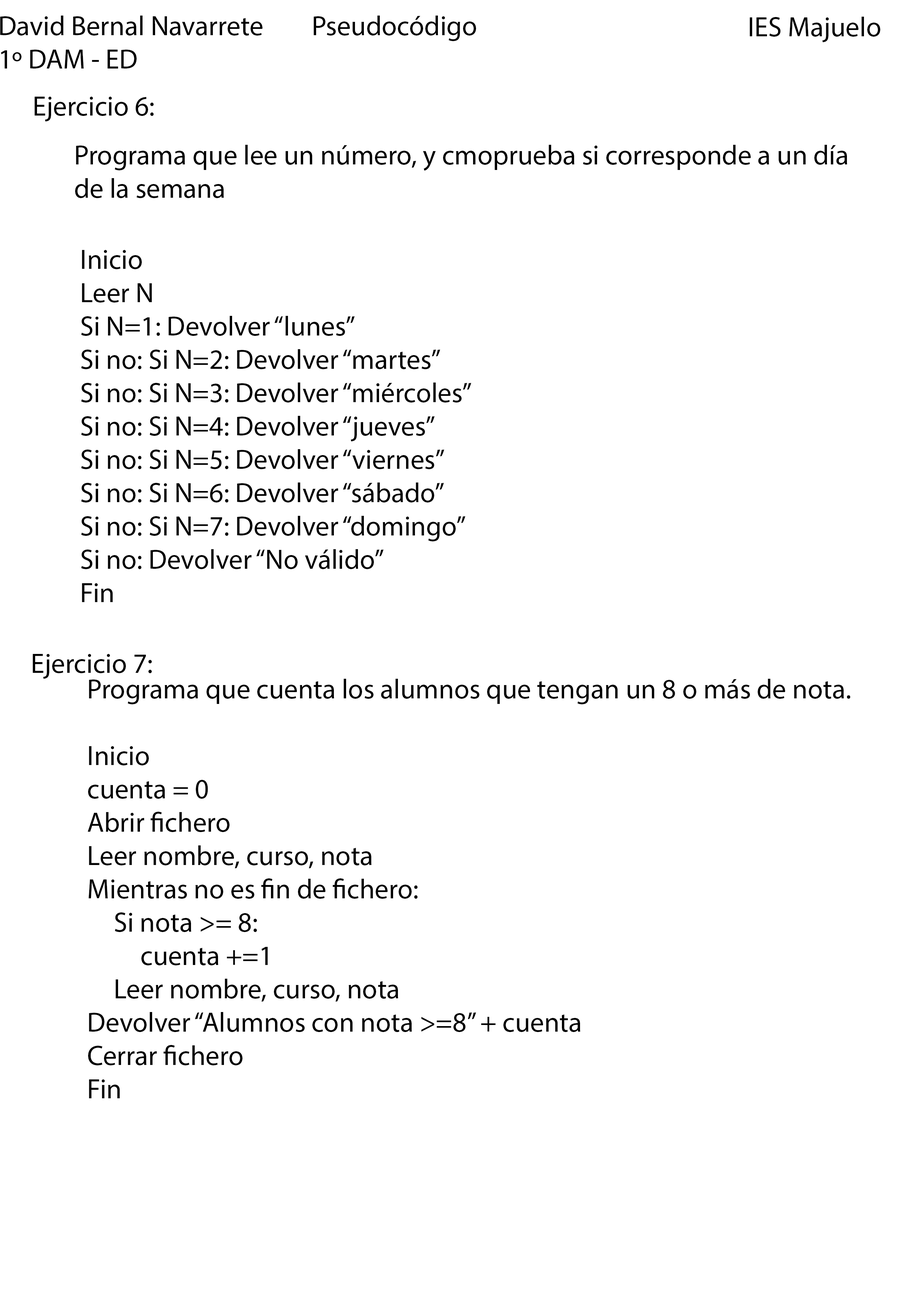
<style>
.page{position:relative;width:918px;height:1299px;background:#ffffff}
.page>*{position:absolute;margin:0}
.t1{font:27.8px "MyriadPro-Regular";color:#000000}
</style>
<div class="page">
<p class="t1" style="left:0px;top:16px;width:476px;height:52px">David Bernal Navarrete         Pseudocódigo<br>1º DAM - ED</p>
<p class="t1" style="left:750px;top:17px;width:130px;height:25px">IES Majuelo</p>
<p class="t1" style="left:34px;top:97px;width:120px;height:24px">Ejercicio 6:</p>
<p class="t1" style="left:75px;top:145px;width:772px;height:53px">Programa que lee un número, y cmoprueba si corresponde a un día<br>de la semana</p>
<p class="t1" style="left:81px;top:250px;width:390px;height:352px">Inicio<br>Leer N<br>Si N=1: Devolver “lunes”<br>Si no: Si N=2: Devolver “martes”<br>Si no: Si N=3: Devolver “miércoles”<br>Si no: Si N=4: Devolver “jueves”<br>Si no: Si N=5: Devolver “viernes”<br>Si no: Si N=6: Devolver “sábado”<br>Si no: Si N=7: Devolver “domingo”<br>Si no: Devolver “No válido”<br>Fin</p>
<p class="t1" style="left:33px;top:654px;width:119px;height:25px">Ejercicio 7:</p>
<p class="t1" style="left:88px;top:679px;width:762px;height:419px">Programa que cuenta los alumnos que tengan un 8 o más de nota.<br><br>Inicio<br>cuenta = 0<br>Abrir fichero<br>Leer nombre, curso, nota <br>Mientras no es fin de fichero:<br>  Si nota &gt;= 8:<br>    cuenta +=1<br>  Leer nombre, curso, nota<br>Devolver “Alumnos con nota &gt;=8” + cuenta<br>Cerrar fichero<br>Fin</p>
</div>
